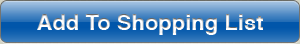
<style>
.page{position:relative;width:300px;height:44px}
.page>*{position:absolute;margin:0}
.t1{font:22px "Helvetica-Bold";color:#ffffff}
</style>
<div class="page">
<p class="t1" style="left:37px;top:14px;width:226px;height:21px">Add To Shopping List</p>
</div>
